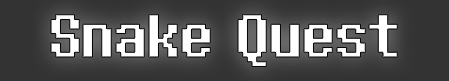
<style>
.page{position:relative;width:449px;height:81px;background:#333333}
.page>*{position:absolute;margin:0}
.t1{font:75px "Determination2";color:#ffffff}
</style>
<div class="page">
<p class="t1" style="left:51px;top:14px;width:347px;height:53px">Snake Quest</p>
</div>
